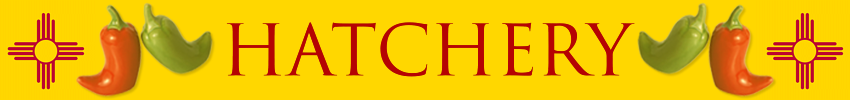
<style>
.page{position:relative;width:850px;height:100px;background:#ffd700}
.page>*{position:absolute;margin:0}
.t1{font:68.8px "TrajanColor-Concept";color:#b50303}
</style>
<div class="page">
<p class="t1" style="left:226px;top:22px;width:409px;height:55px">HATCHERY</p>
</div>
